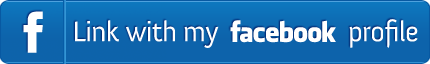
<style>
.page{position:relative;width:430px;height:64px;background:#0d63ab}
.page>*{position:absolute;margin:0}
.t1{font:28.9px "Anivers-Regular";letter-spacing:-0.025em;color:#ffffff}
</style>
<div class="page">
<p class="t1" style="left:75px;top:19px;width:343px;height:29px">Link with my                    profile</p>
</div>
